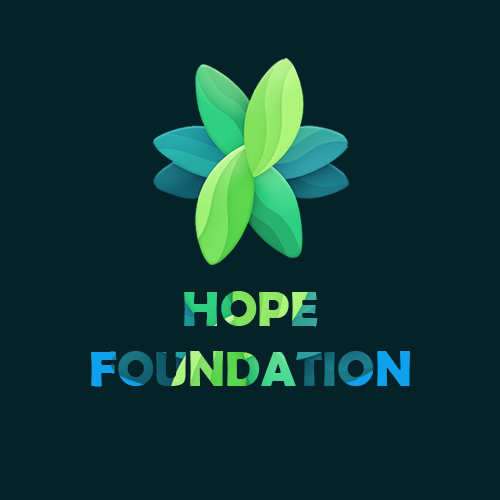
<style>
.page{position:relative;width:500px;height:500px;background:#062229}
.page>*{position:absolute;margin:0}
.t1{font:50px "BerlinSansFBDemi-Bold"}
</style>
<div class="page">
<p class="t1" style="left:91px;top:291px;width:319px;height:96px;text-align:center">HOPE<br>FOUNDATION</p>
</div>
